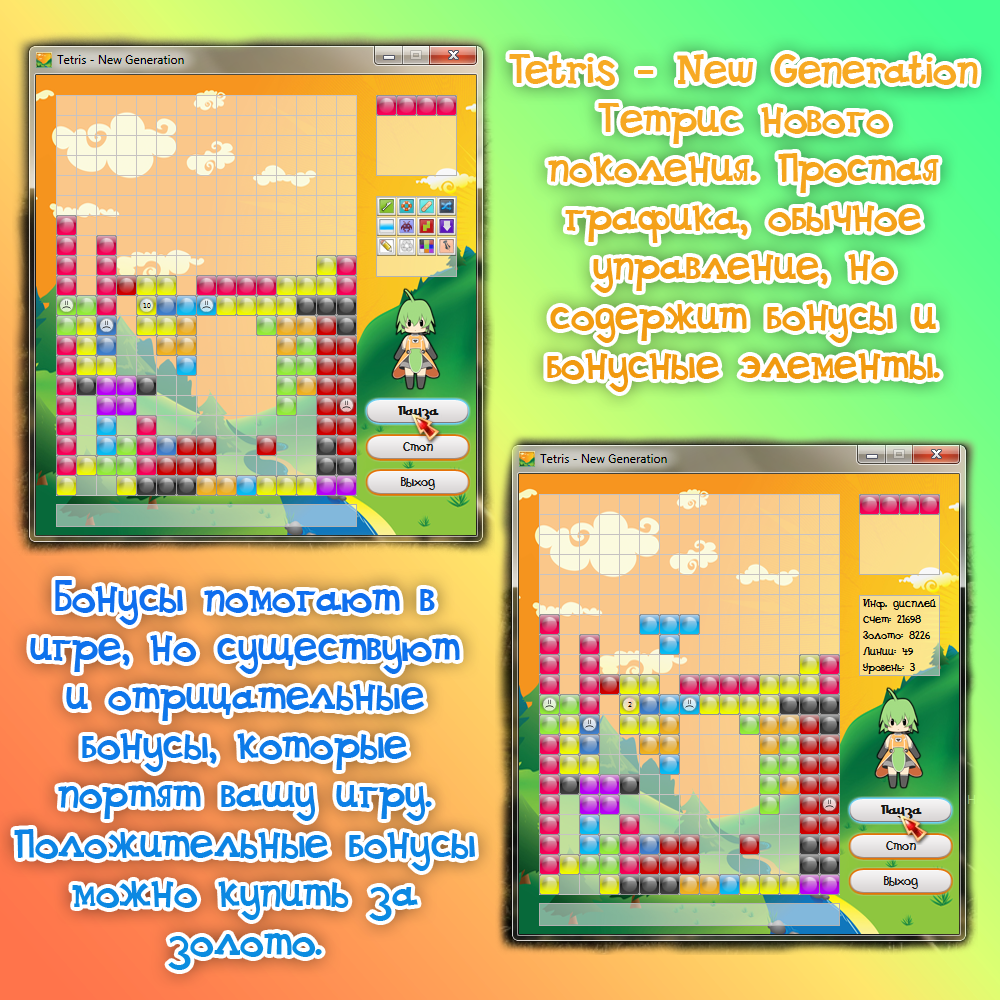
<style>
.page{position:relative;width:1000px;height:1000px}
.page>*{position:absolute;margin:0}
.t1{font:41px "DSGoose";color:#f4a219}
.t2{font:41px "DSGoose";color:#0d7be8}
</style>
<div class="page">
<p class="t1" style="left:509px;top:54px;width:469px;height:338px;text-align:center">Tetris - New Generation<br>Тетрис нового поколения. Простая графика, обычное управление, но содержит бонусы и бонусные элементы.</p>
<p class="t2" style="left:14px;top:580px;width:461px;height:390px;text-align:center">Бонусы помогают в игре, но существуют и отрицательные бонусы, которые портят вашу игру. Положительные бонусы можно купить за золото.</p>
</div>
